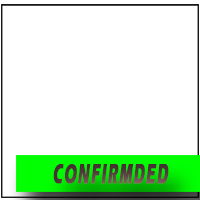
<style>
.page{position:relative;width:200px;height:200px;background:#ffffff}
.page>*{position:absolute;margin:0}
.t1{font:27.6px "ErasITC-Bold";letter-spacing:0.1em;color:#503b3b;font-weight:bold;font-style:italic;scale:0.5 1}
</style>
<div class="page">
<p class="t1" style="left:53px;top:164px;width:116px;height:20px">CONFIRMDED</p>
</div>
